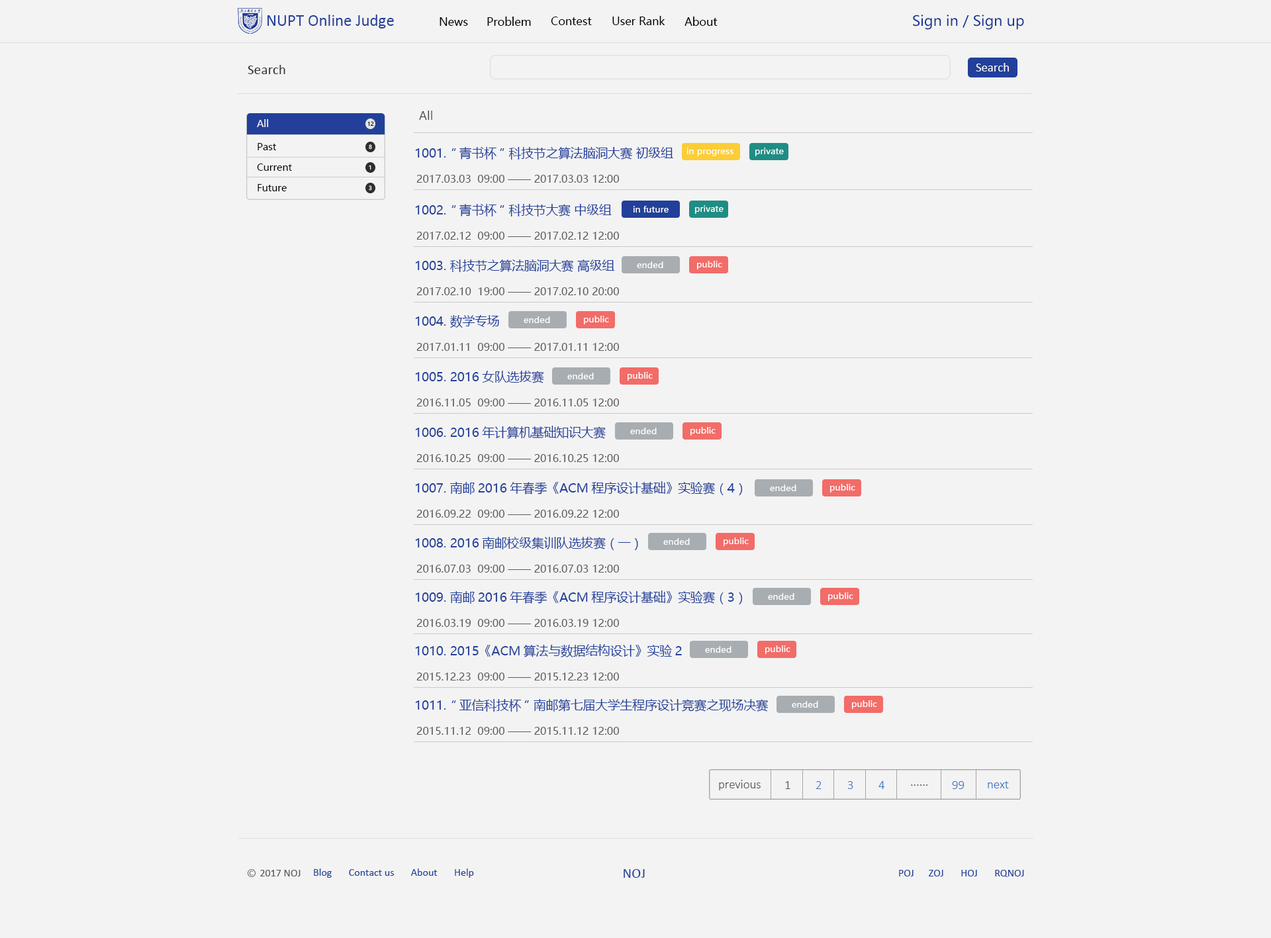
<style>
.page{position:relative;width:1271px;height:938px;background:#f3f3f3}
.page>*{position:absolute;margin:0}
.t1{font:16.6px "Calibri";color:#22409a}
.t2{font:11px "MicrosoftYaHei";color:#000000}
.t3{font:14.1px "MicrosoftYaHei";color:#1a3795}
.t4{font:14.1px "Calibri";color:#333333}
.t5{font:12.4px "Calibri";color:#f3f3f3}
.t6{font:14.1px "Calibri-Light";color:#333333}
.t7{font:9.7px "MicrosoftYaHei";color:#f3f3f3}
.t8{font:5.3px "MicrosoftYaHei"}
.t9{font:9.7px "MicrosoftYaHei";color:#000000}
.t10{font:5.3px "MicrosoftYaHei";color:#ffffff}
.t11{font:12.4px "MicrosoftYaHei";color:#22409a}
.t12{font:8.8px "MicrosoftYaHei";color:#ffffff}
.t13{font:10.6px "MicrosoftYaHei";color:#5b5b5b}
.t14{font:12.4px "Calibri-Light";color:#5b5b5b}
.t15{font:12.4px "Calibri-Light";color:#4078c0}
.t16{font:10.6px "Calibri";color:#5b5b5b}
.t17{font:10.6px "Calibri";color:#22409a}
.t18{font:14.1px "Calibri";color:#22409a}
</style>
<div class="page">
<p class="t1" style="left:267px;top:15px;width:127px;height:13px">NUPT Online Judge</p>
<p class="t2" style="left:440px;top:17px;width:28px;height:9px">News</p>
<p class="t2" style="left:487px;top:17px;width:44px;height:9px">Problem</p>
<p class="t2" style="left:551px;top:17px;width:41px;height:8px">Contest</p>
<p class="t2" style="left:612px;top:16px;width:53px;height:9px">User Rank</p>
<p class="t2" style="left:685px;top:17px;width:33px;height:9px">About</p>
<p class="t3" style="left:913px;top:15px;width:111px;height:15px">Sign in / Sign up</p>
<p class="t4" style="left:248px;top:65px;width:37px;height:9px">Search</p>
<p class="t5" style="left:976px;top:63px;width:33px;height:8px">Search</p>
<p class="t6" style="left:419px;top:111px;width:13px;height:9px">All</p>
<p class="t7" style="left:257px;top:119px;width:12px;height:8px">All</p>
<p class="t8" style="left:367px;top:121px;width:7px;height:5px">12</p>
<p class="t9" style="left:258px;top:143px;width:18px;height:7px">Past</p>
<p class="t10" style="left:369px;top:144px;width:3px;height:6px">8</p>
<p class="t11" style="left:415px;top:147px;width:258px;height:13px">1001. “青书杯”科技节之算法脑洞大赛 初级组</p>
<p class="t12" style="left:687px;top:148px;width:47px;height:8px">in progress</p>
<p class="t12" style="left:755px;top:148px;width:29px;height:8px">private</p>
<p class="t9" style="left:257px;top:164px;width:35px;height:7px">Current</p>
<p class="t10" style="left:369px;top:165px;width:2px;height:5px">1</p>
<p class="t9" style="left:258px;top:184px;width:29px;height:7px">Future</p>
<p class="t10" style="left:369px;top:185px;width:3px;height:6px">3</p>
<p class="t13" style="left:416px;top:175px;width:203px;height:8px">2017.03.03  09:00 —— 2017.03.03 12:00</p>
<p class="t11" style="left:415px;top:204px;width:197px;height:12px">1002. “青书杯”科技节大赛 中级组</p>
<p class="t12" style="left:633px;top:206px;width:36px;height:7px">in future</p>
<p class="t12" style="left:695px;top:205px;width:29px;height:9px">private</p>
<p class="t13" style="left:416px;top:232px;width:203px;height:8px">2017.02.12  09:00 —— 2017.02.12 12:00</p>
<p class="t11" style="left:415px;top:260px;width:200px;height:12px">1003. 科技节之算法脑洞大赛 高级组</p>
<p class="t12" style="left:637px;top:262px;width:26px;height:6px">ended</p>
<p class="t12" style="left:697px;top:261px;width:25px;height:8px">public</p>
<p class="t13" style="left:416px;top:287px;width:203px;height:8px">2017.02.10  19:00 —— 2017.02.10 20:00</p>
<p class="t11" style="left:415px;top:315px;width:84px;height:13px">1004. 数学专场</p>
<p class="t12" style="left:524px;top:316px;width:26px;height:7px">ended</p>
<p class="t12" style="left:584px;top:316px;width:25px;height:8px">public</p>
<p class="t13" style="left:416px;top:343px;width:203px;height:8px">2017.01.11  09:00 —— 2017.01.11 12:00</p>
<p class="t11" style="left:415px;top:371px;width:129px;height:12px">1005. 2016女队选拔赛</p>
<p class="t12" style="left:567px;top:373px;width:27px;height:6px">ended</p>
<p class="t12" style="left:628px;top:372px;width:25px;height:9px">public</p>
<p class="t13" style="left:416px;top:399px;width:203px;height:7px">2016.11.05  09:00 —— 2016.11.05 12:00</p>
<p class="t11" style="left:415px;top:426px;width:191px;height:13px">1006. 2016年计算机基础知识大赛</p>
<p class="t12" style="left:630px;top:428px;width:27px;height:6px">ended</p>
<p class="t12" style="left:691px;top:427px;width:25px;height:9px">public</p>
<p class="t13" style="left:416px;top:454px;width:203px;height:8px">2016.10.25  09:00 —— 2016.10.25 12:00</p>
<p class="t11" style="left:415px;top:481px;width:328px;height:14px">1007. 南邮2016年春季《ACM程序设计基础》实验赛（4）</p>
<p class="t12" style="left:770px;top:485px;width:26px;height:6px">ended</p>
<p class="t12" style="left:830px;top:484px;width:25px;height:9px">public</p>
<p class="t13" style="left:416px;top:510px;width:203px;height:8px">2016.09.22  09:00 —— 2016.09.22 12:00</p>
<p class="t11" style="left:415px;top:537px;width:223px;height:13px">1008. 2016南邮校级集训队选拔赛（一）</p>
<p class="t12" style="left:663px;top:538px;width:27px;height:7px">ended</p>
<p class="t12" style="left:724px;top:538px;width:25px;height:8px">public</p>
<p class="t13" style="left:416px;top:565px;width:203px;height:8px">2016.07.03  09:00 —— 2016.07.03 12:00</p>
<p class="t11" style="left:415px;top:591px;width:328px;height:13px">1009. 南邮2016年春季《ACM程序设计基础》实验赛（3）</p>
<p class="t12" style="left:768px;top:593px;width:26px;height:7px">ended</p>
<p class="t12" style="left:828px;top:593px;width:25px;height:8px">public</p>
<p class="t13" style="left:416px;top:619px;width:203px;height:8px">2016.03.19  09:00 —— 2016.03.19 12:00</p>
<p class="t11" style="left:415px;top:644px;width:267px;height:13px">1010. 2015《ACM算法与数据结构设计》实验2</p>
<p class="t12" style="left:705px;top:646px;width:27px;height:7px">ended</p>
<p class="t12" style="left:765px;top:645px;width:25px;height:9px">public</p>
<p class="t13" style="left:416px;top:673px;width:203px;height:8px">2015.12.23  09:00 —— 2015.12.23 12:00</p>
<p class="t11" style="left:415px;top:699px;width:354px;height:13px">1011. “亚信科技杯”南邮第七届大学生程序设计竞赛之现场决赛</p>
<p class="t12" style="left:792px;top:701px;width:26px;height:7px">ended</p>
<p class="t12" style="left:852px;top:700px;width:25px;height:9px">public</p>
<p class="t13" style="left:416px;top:727px;width:203px;height:8px">2015.11.12  09:00 —— 2015.11.12 12:00</p>
<p class="t14" style="left:719px;top:780px;width:42px;height:10px">previous</p>
<p class="t14" style="left:785px;top:781px;width:5px;height:8px">1</p>
<p class="t15" style="left:816px;top:781px;width:6px;height:8px">2</p>
<p class="t15" style="left:847px;top:781px;width:6px;height:8px">3</p>
<p class="t15" style="left:879px;top:781px;width:6px;height:8px">4</p>
<p class="t14" style="left:911px;top:785px;width:17px;height:1px">......</p>
<p class="t15" style="left:952px;top:781px;width:13px;height:8px">99</p>
<p class="t15" style="left:988px;top:781px;width:21px;height:7px">next</p>
<p class="t16" style="left:260px;top:870px;width:41px;height:7px">2017 NOJ</p>
<p class="t17" style="left:314px;top:869px;width:160px;height:9px">Blog       Contact us       About       Help</p>
<p class="t18" style="left:624px;top:869px;width:21px;height:9px">NOJ</p>
<p class="t17" style="left:899px;top:870px;width:125px;height:7px">POJ      ZOJ       HOJ       RQNOJ</p>
</div>
